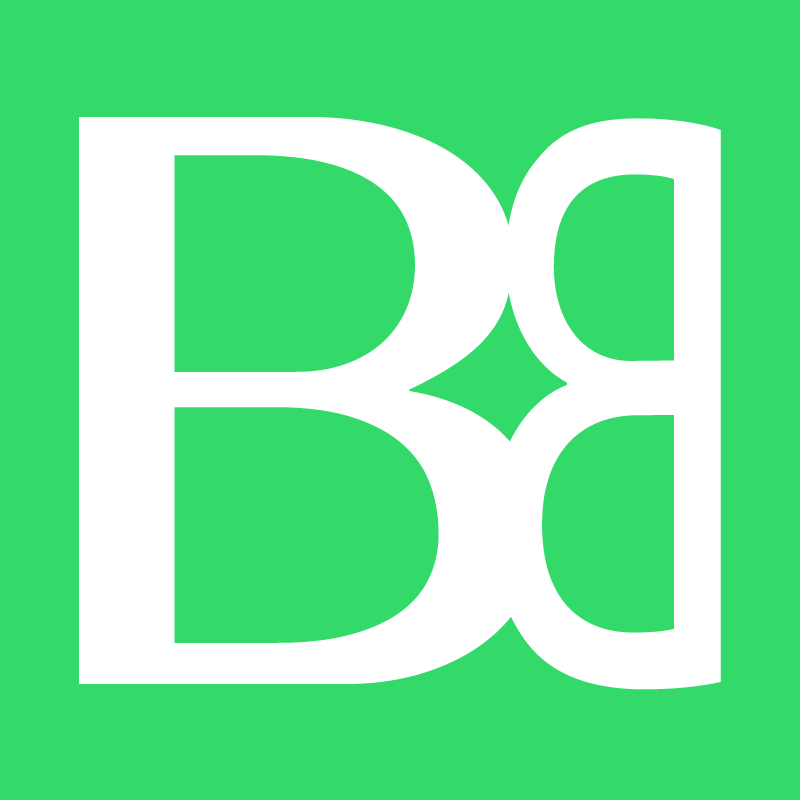
<style>
.page{position:relative;width:800px;height:800px;background:#33da69}
.page>*{position:absolute;margin:0}
.t1{font:833.3px "MyanmarMN";color:#ffffff}
.t2{font:833.3px "MyriadPro-Regular";color:#ffffff;scale:0.64 1}
</style>
<div class="page">
<p class="t1" style="left:79px;top:117px;width:463px;height:567px">B</p>
<p class="t2" style="left:492px;top:118px;width:229px;height:572px;rotate:179deg">B</p>
</div>
